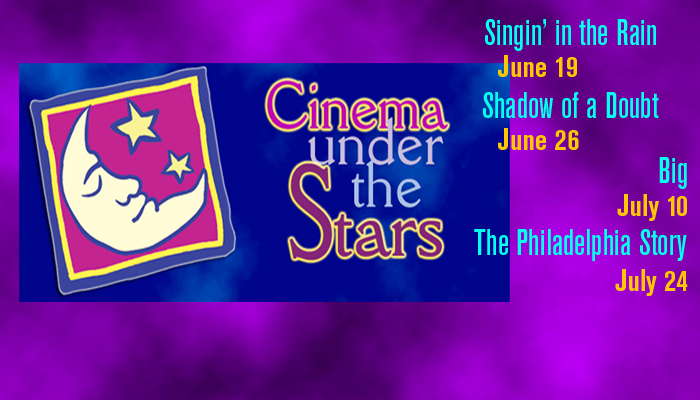
<style>
.page{position:relative;width:700px;height:400px}
.page>*{position:absolute;margin:0}
.t1{font:36px "AkzidenzGroteskBE-MdCn";color:#03fff0}
.t2{font:30px "AkzidenzGroteskBE-BoldCn";color:#ffc703}
</style>
<div class="page">
<p class="t1" style="left:485px;top:19px;width:171px;height:32px">Singin’ in the Rain</p>
<p class="t2" style="left:498px;top:55px;width:79px;height:22px">June 19</p>
<p class="t1" style="left:483px;top:92px;width:176px;height:26px">Shadow of a Doubt</p>
<p class="t2" style="left:498px;top:128px;width:81px;height:22px">June 26</p>
<p class="t1" style="left:659px;top:157px;width:28px;height:32px">Big</p>
<p class="t2" style="left:617px;top:194px;width:70px;height:27px">July 10</p>
<p class="t1" style="left:474px;top:229px;width:213px;height:32px">The Philadelphia Story</p>
<p class="t2" style="left:615px;top:269px;width:73px;height:27px">July 24</p>
</div>
